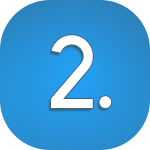
<style>
.page{position:relative;width:150px;height:150px}
.page>*{position:absolute;margin:0}
.t1{font:100px "Biko";color:#ffffff}
</style>
<div class="page">
<p class="t1" style="left:51px;top:35px;width:61px;height:73px">2.</p>
</div>
